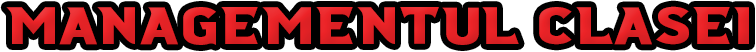
<style>
.page{position:relative;width:756px;height:52px;background:#000000}
.page>*{position:absolute;margin:0}
.t1{font:52.5px "Ridgeline201-Regular";color:#e62226}
</style>
<div class="page">
<p class="t1" style="left:6px;top:6px;width:743px;height:39px">Managementul clasei</p>
</div>
